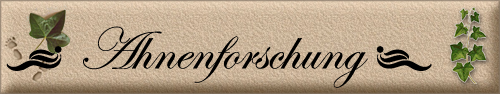
<style>
.page{position:relative;width:500px;height:94px}
.page>*{position:absolute;margin:0}
.t1{font:60px "EdwardianScriptITC";color:#000000}
.t2{font:72px "EdwardianScriptITC";color:#000000}
.t3{font:30px "AbsinthFlourishesII";color:#000000}
</style>
<div class="page">
<p class="t1" style="left:6px;top:26px;width:426px;height:62px"><span class="t2">     </span><span class="t3">O </span>Ahnenforschung <span class="t3">N</span></p>
</div>
